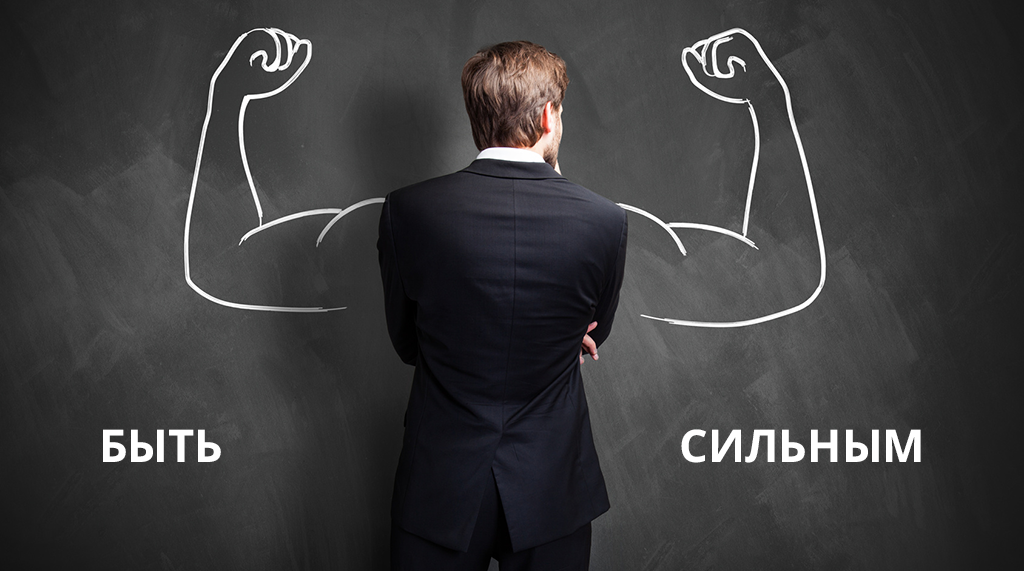
<style>
.page{position:relative;width:1024px;height:571px}
.page>*{position:absolute;margin:0}
.t1{font:45px "OpenSans-Bold";color:#ffffff;text-transform:uppercase}
</style>
<div class="page">
<p class="t1" style="left:103px;top:429px;width:818px;height:34px">Быть                                       сильным</p>
</div>
